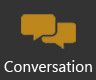
<style>
.page{position:relative;width:96px;height:80px;background:#333333}
.page>*{position:absolute;margin:0}
.t1{font:16.3px "SegoeUI";color:#fffdfd;scale:0.94 1}
</style>
<div class="page">
<p class="t1" style="left:4px;top:60px;width:88px;height:12px">Conversation</p>
</div>
